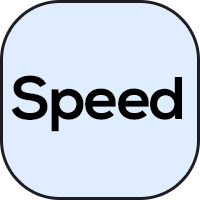
<style>
.page{position:relative;width:200px;height:200px;background:#e0edff}
.page>*{position:absolute;margin:0}
.t1{font:60px "NexaBold";letter-spacing:-0.04em;color:#000000}
</style>
<div class="page">
<p class="t1" style="left:11px;top:75px;width:171px;height:57px">Speed</p>
</div>
